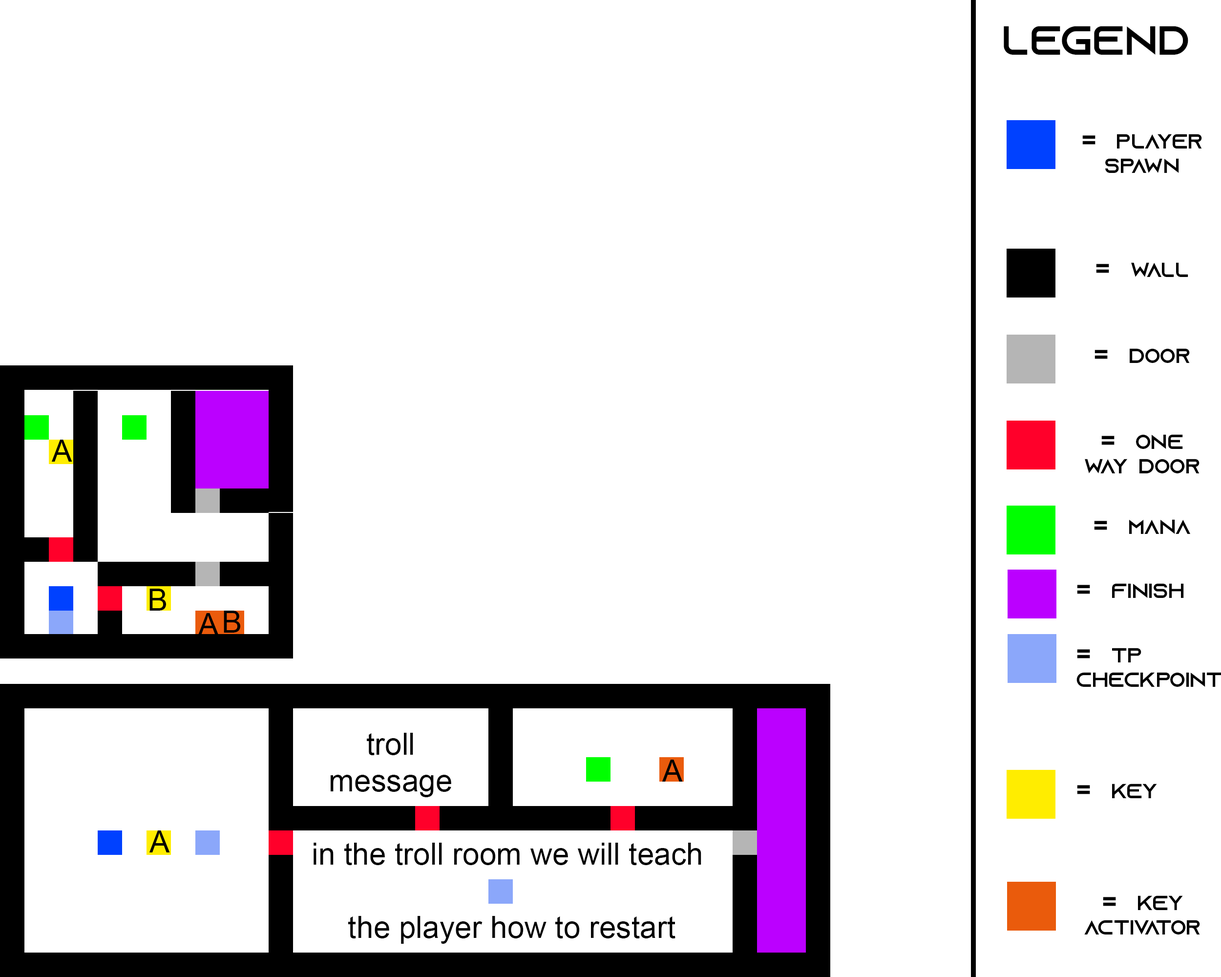
<style>
.page{position:relative;width:1221px;height:977px;background:#ffffff}
.page>*{position:absolute;margin:0}
.t1{font:40.7px "AzonixRegular";color:#000000}
.t2{font:20.3px "AzonixRegular";color:#000000}
.t3{font:26.5px "AzonixRegular";color:#000000}
.t4{font:30.5px "ArialMT";color:#000000}
</style>
<div class="page">
<p class="t1" style="left:1004px;top:26px;width:184px;height:29px">LEGEND</p>
<p class="t2" style="left:1082px;top:134px;width:120px;height:39px"><span class="t3">= </span>player spawn</p>
<p class="t2" style="left:1096px;top:262px;width:92px;height:15px"><span class="t3">= </span>wall</p>
<p class="t2" style="left:1094px;top:348px;width:96px;height:15px"><span class="t3">= </span>Door</p>
<p class="t2" style="left:1085px;top:434px;width:114px;height:39px"><span class="t3">= </span>One way door</p>
<p class="t4" style="left:51px;top:440px;width:21px;height:21px">A</p>
<p class="t2" style="left:1094px;top:519px;width:97px;height:15px"><span class="t3">= </span>Mana</p>
<p class="t4" style="left:149px;top:588px;width:17px;height:22px">B</p>
<p class="t2" style="left:1077px;top:583px;width:107px;height:15px"><span class="t3">= </span>Finish</p>
<p class="t4" style="left:198px;top:613px;width:21px;height:22px">A</p>
<p class="t4" style="left:224px;top:610px;width:16px;height:22px">B</p>
<p class="t2" style="left:1076px;top:648px;width:145px;height:39px"><span class="t3">= </span>TP Checkpoint</p>
<p class="t4" style="left:331px;top:733px;width:120px;height:64px;text-align:center">troll message</p>
<p class="t4" style="left:662px;top:759px;width:21px;height:22px">A</p>
<p class="t2" style="left:1077px;top:783px;width:80px;height:15px"><span class="t3">= </span>KEY</p>
<p class="t4" style="left:149px;top:830px;width:21px;height:22px">A</p>
<p class="t4" style="left:314px;top:842px;width:387px;height:101px;text-align:center">in the troll room we will teach<br><br> the player how to restart</p>
<p class="t2" style="left:1084px;top:895px;width:116px;height:39px"><span class="t3">= </span>KEY activator</p>
</div>
